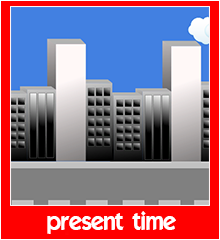
<style>
.page{position:relative;width:220px;height:240px;background:#ff0000}
.page>*{position:absolute;margin:0}
.t1{font:24px "ELEGANCE";color:#ffffff}
</style>
<div class="page">
<p class="t1" style="left:47px;top:211px;width:129px;height:23px">present time</p>
</div>
